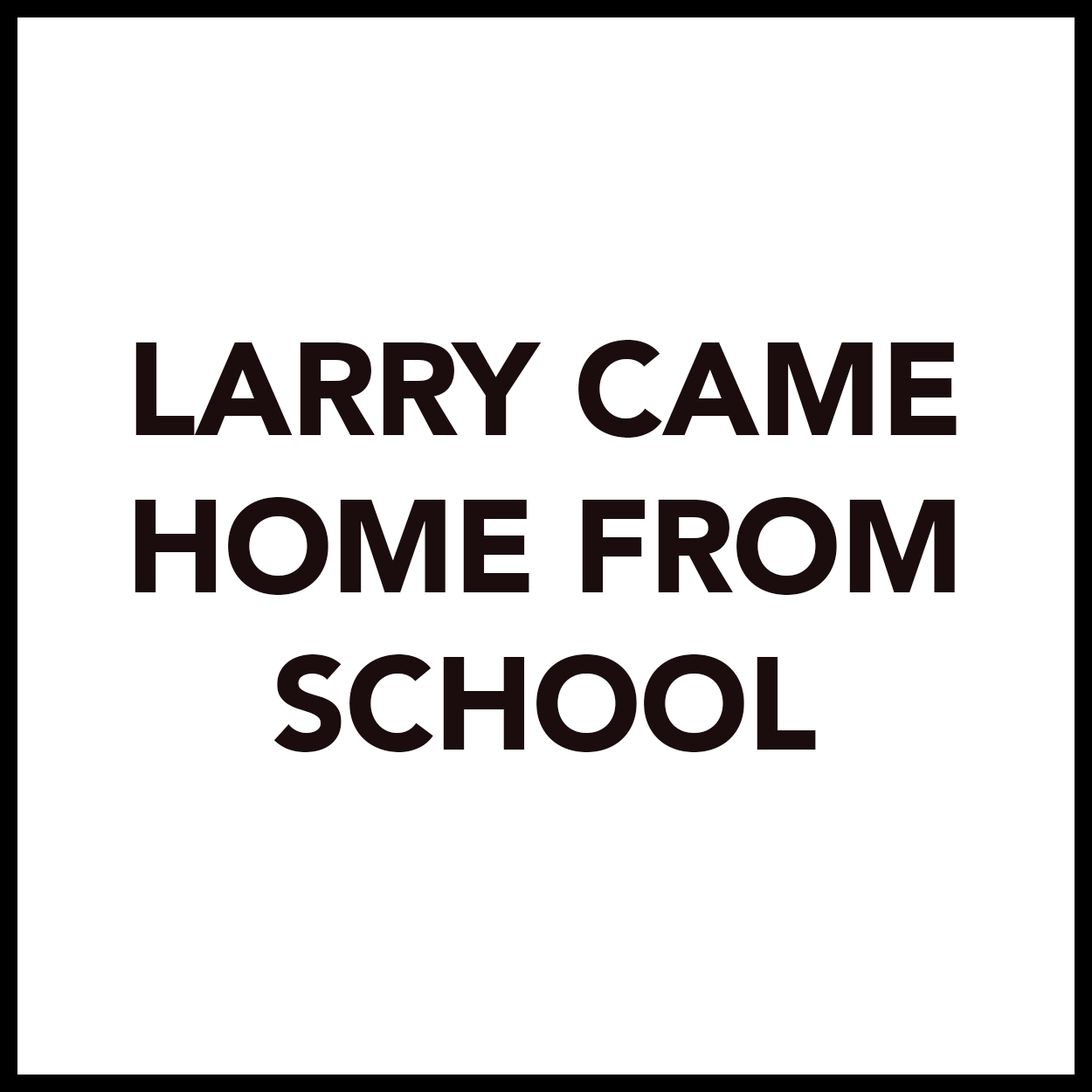
<style>
.page{position:relative;width:1092px;height:1092px;background:#ffffff}
.page>*{position:absolute;margin:0}
.t1{font:131px "Avenir-Black";letter-spacing:-0.01em;color:#1b0d0d}
</style>
<div class="page">
<p class="t1" style="left:135px;top:340px;width:822px;height:412px;text-align:center">LARRY CAME<br>HOME FROM<br>SCHOOL</p>
</div>
